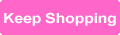
<style>
.page{position:relative;width:120px;height:35px;background:#ff66c9}
.page>*{position:absolute;margin:0}
.t1{font:14px "Arial-BoldMT";letter-spacing:-0.025em;color:#ffffff;scale:1.15 1}
</style>
<div class="page">
<p class="t1" style="left:4px;top:12px;width:112px;height:14px">Keep Shopping</p>
</div>
